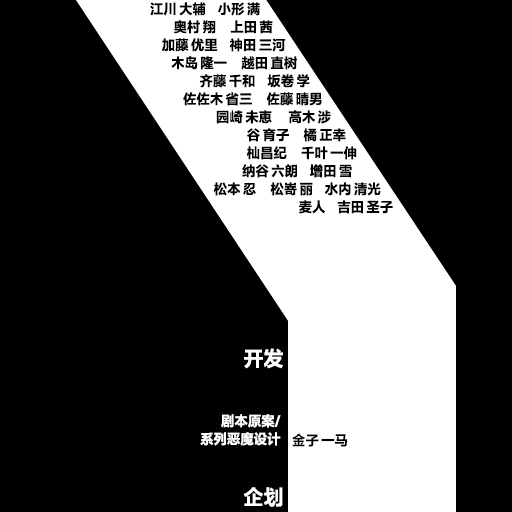
<style>
.page{position:relative;width:512px;height:512px;background:#000000}
.page>*{position:absolute;margin:0}
.t1{font:13.5px/18px "FZLTHProGlobal-Bold";letter-spacing:0.005em;color:#000000}
.t2{font:20.2px/21.3px "FZLTHProGlobal-Bold";letter-spacing:0.005em;color:#ffffff}
.t3{font:20.2px/26.7px "FZLTHProGlobal-Bold";letter-spacing:0.005em;color:#ffffff}
.t4{font:13.5px/18px "FZLTHProGlobal-Bold";letter-spacing:0.005em;color:#ffffff}
.t5{font:13.5px "FZLTHProGlobal-Bold";letter-spacing:0.005em;color:#000000}
</style>
<div class="page">
<p class="t1" style="left:150px;top:2px;width:243px;height:212px">江川 大辅     小形 满<br>          奥村 翔      上田 茜<br>     加藤 优里     神田 三河<br>         木岛 隆一      越田 直树<br>                     齐藤 千和     坂卷 学<br>              佐佐木 省三      佐藤 晴男<br>                            园崎 未恵       高木 涉<br>                                         谷 育子      橘 正幸<br>                                         杣昌纪      千叶 一伸<br>                                       纳谷 六朗     增田 雪<br>                           松本 忍      松嵜 丽     水内 清光<br>                                                               麦人     吉田 圣子</p>
<p class="t2" style="left:243px;top:348px;width:40px;height:159px;text-align:right">开发<br><br><br><br><span class="t3"><br><br>企划</span></p>
<p class="t4" style="left:200px;top:414px;width:81px;height:32px;text-align:right">剧本原案/<br>系列恶魔设计</p>
<p class="t5" style="left:292px;top:433px;width:56px;height:14px">金子 一马</p>
</div>
